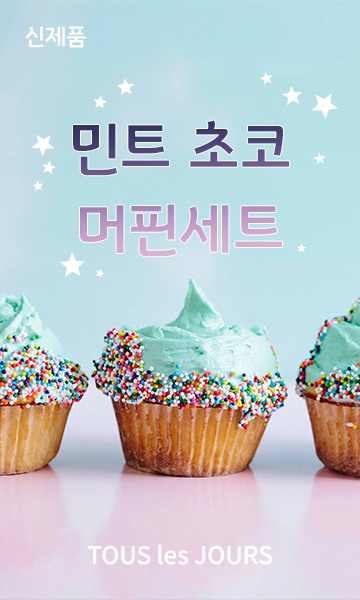
<style>
.page{position:relative;width:360px;height:600px}
.page>*{position:absolute;margin:0}
.t1{font:24px "GyeonggiTitleM";color:#fefefd}
.t2{font:60px/81px "GyeonggiTitleM"}
.t3{font:24px "NotoSansKR-Medium";color:#fefefd}
</style>
<div class="page">
<p class="t1" style="left:25px;top:26px;width:61px;height:22px">신제품</p>
<p class="t2" style="left:73px;top:120px;width:216px;height:137px;text-align:center">민트 초코<br>머핀세트</p>
<p class="t3" style="left:87px;top:544px;width:185px;height:21px">TOUS les JOURS</p>
</div>
